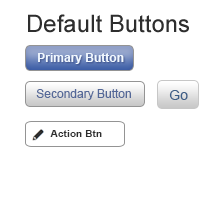
<style>
.page{position:relative;width:215px;height:220px;background:#ffffff}
.page>*{position:absolute;margin:0}
.t1{font:24px "ArialMT";color:#2e2e2e}
.t2{font:12px "Arial-BoldMT";color:#f1f8ff}
.t3{font:12px "ArialMT";color:#546898}
.t4{font:14px "ArialMT";color:#3d5e87}
.t5{font:10px "Arial-BoldMT";letter-spacing:0.01em;color:#2e2e2e}
</style>
<div class="page">
<p class="t1" style="left:28px;top:14px;width:161px;height:19px">Default Buttons</p>
<p class="t2" style="left:38px;top:53px;width:86px;height:11px">Primary Button</p>
<p class="t3" style="left:36px;top:89px;width:95px;height:11px">Secondary Button</p>
<p class="t4" style="left:169px;top:90px;width:19px;height:10px">Go</p>
<p class="t5" style="left:50px;top:130px;width:52px;height:7px">Action Btn</p>
</div>
